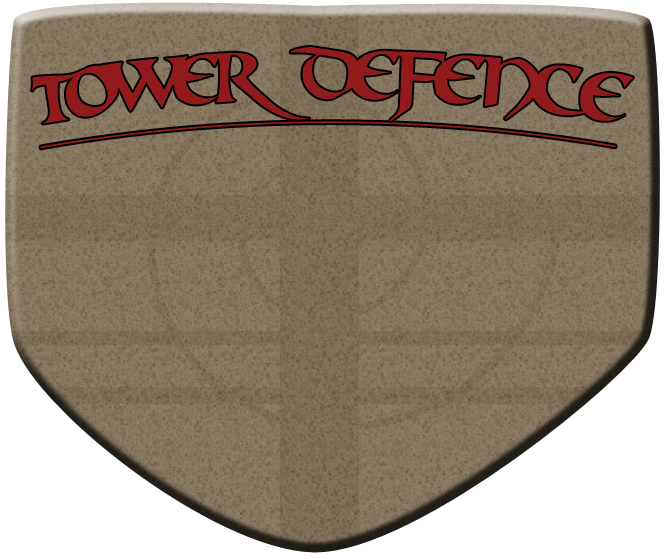
<style>
.page{position:relative;width:664px;height:559px}
.page>*{position:absolute;margin:0}
.t1{font:76.2px "Mael";letter-spacing:-0.025em;color:#911b1b;text-decoration:underline}
</style>
<div class="page">
<p class="t1" style="left:31px;top:47px;width:602px;height:102px">Tower Defence</p>
</div>
